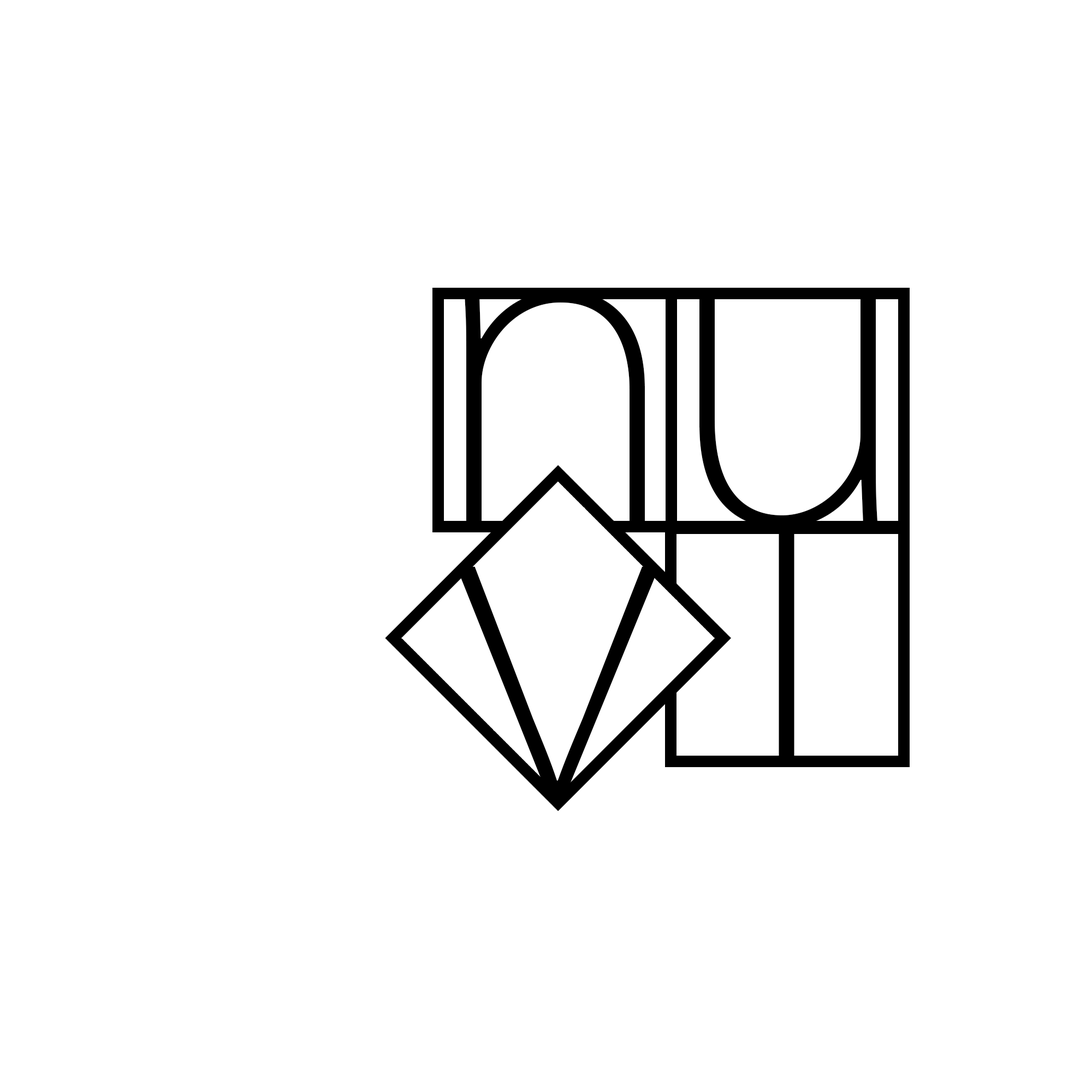
<style>
.page{position:relative;width:1092px;height:1092px;background:#ffffff}
.page>*{position:absolute;margin:0}
.t1{font:436.8px "KozGoPr6N-ExtraLight";color:#000000}
</style>
<div class="page">
<p class="t1" style="left:464px;top:289px;width:181px;height:240px">n</p>
<p class="t1" style="left:699px;top:288px;width:179px;height:240px">u</p>
<p class="t1" style="left:456px;top:567px;width:204px;height:234px">v</p>
</div>
